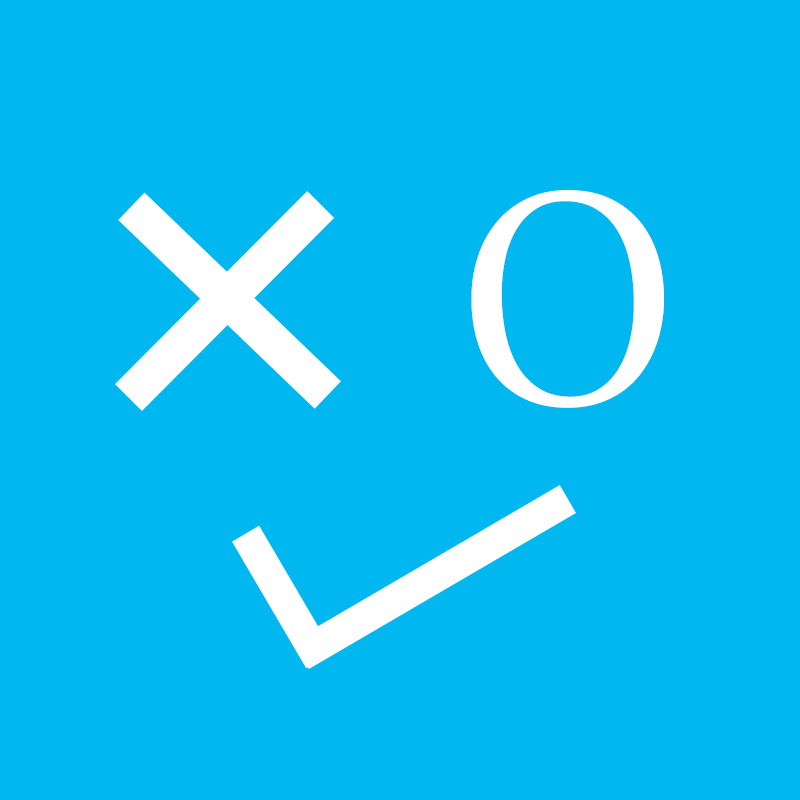
<style>
.page{position:relative;width:800px;height:800px;background:#00b7ef}
.page>*{position:absolute;margin:0}
.t1{font:339.8px "SitkaBanner";color:#ffffff}
</style>
<div class="page">
<p class="t1" style="left:471px;top:190px;width:193px;height:218px">O</p>
</div>
